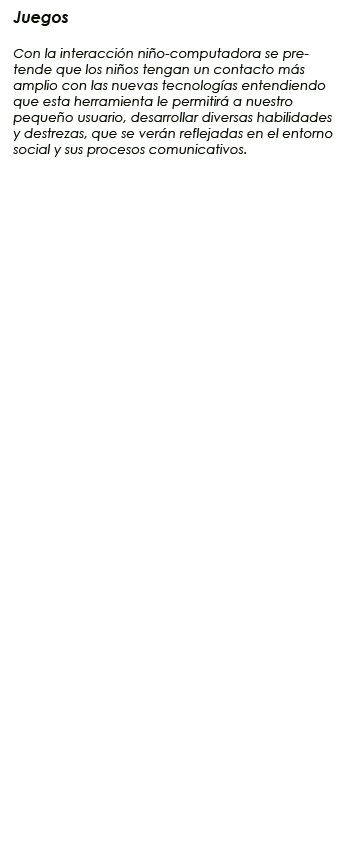
<style>
.page{position:relative;width:347px;height:848px;background:#ffffff}
.page>*{position:absolute;margin:0}
.t1{font:13.3px "CenturyGothic-Italic";color:#081001}
.t2{font:16px "CenturyGothic-BoldItalic";color:#081001}
</style>
<div class="page">
<p class="t1" style="left:13px;top:11px;width:320px;height:146px"><span class="t2">Juegos<br><br></span>Con la interacción niño-computadora se pretende que los niños tengan un contacto más amplio con las nuevas tecnologías entendiendo que esta herramienta le permitirá a nuestro pequeño usuario, desarrollar diversas habilidades y destrezas, que se verán reflejadas en el entorno social y sus procesos comunicativos.</p>
</div>
